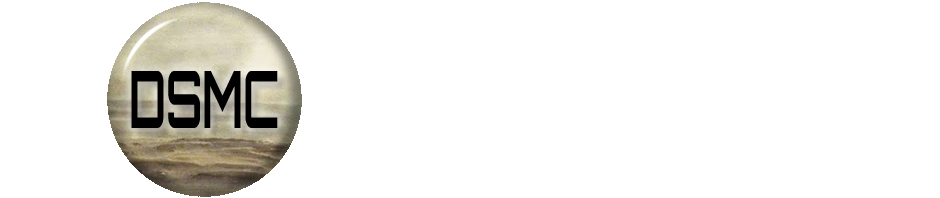
<style>
.page{position:relative;width:940px;height:198px;background:#ffffff}
.page>*{position:absolute;margin:0}
.t1{font:79.4px "Orbitron-Bold";color:#000000;scale:0.56 1}
</style>
<div class="page">
<p class="t1" style="left:131px;top:71px;width:147px;height:57px">DSMC</p>
</div>
